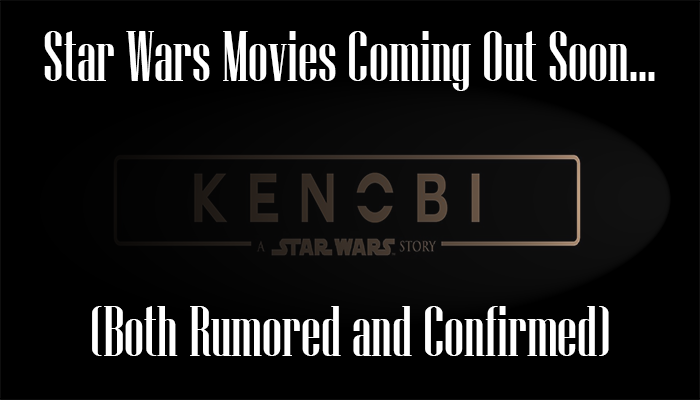
<style>
.page{position:relative;width:700px;height:400px;background:#000000}
.page>*{position:absolute;margin:0}
.t1{font:72px "NiagaraSolid-Reg";color:#ffffff}
</style>
<div class="page">
<p class="t1" style="left:44px;top:31px;width:611px;height:60px">Star Wars Movies Coming Out Soon...</p>
<p class="t1" style="left:92px;top:306px;width:517px;height:50px">(Both Rumored and Confirmed)</p>
</div>
